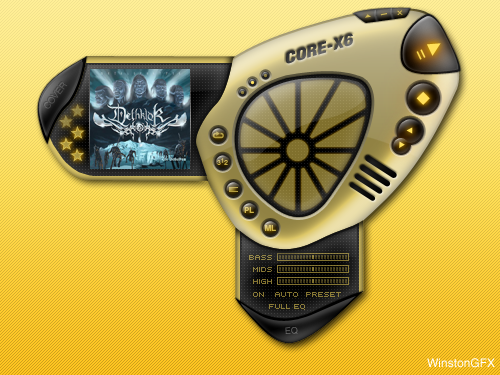
<style>
.page{position:relative;width:500px;height:375px}
.page>*{position:absolute;margin:0}
.t1{font:16.6px "Helvetica";color:#cbb556;scale:0.65 1}
.t2{font:5.5px "Helvetica";color:#cab455;scale:1.41 1}
.t3{font:14.7px "Helvetica-Condensed-BlackObl";scale:1.36 1}
.t4{font:6px "Helvetica";color:#c1ab4e}
.t5{font:6px "Helvetica";color:#ccba6f}
.t6{font:6px "Helvetica";color:#c3ad4e}
.t7{font:8px "Helvetica-Bold"}
.t8{font:8px "Uni0553";color:#928446;text-transform:uppercase}
.t9{font:8px "Uni0553";color:#887939;text-transform:uppercase}
.t10{font:8px "Uni0553";color:#81722e;text-transform:uppercase}
.t11{font:8px "Uni0553";color:#887835;text-transform:uppercase}
.t12{font:8px "Uni0553";color:#81712e;text-transform:uppercase}
.t13{font:8px "Uni0553";color:#897936;text-transform:uppercase}
.t14{font:8px "Uni0553";color:#8a7b37;text-transform:uppercase}
.t15{font:9px "Helvetica";text-transform:uppercase}
.t16{font:12px "Helvetica";color:#ffffff}
</style>
<div class="page">
<p class="t1" style="left:380px;top:13px;width:7px;height:3px;rotate:-11deg">_</p>
<p class="t2" style="left:397px;top:10px;width:6px;height:5px;rotate:-4deg">X</p>
<p class="t3" style="left:286px;top:33px;width:67px;height:31px;rotate:-16deg">CORE-X6</p>
<p class="t4" style="left:217px;top:160px;width:4px;height:5px">3</p>
<p class="t5" style="left:221px;top:158px;width:3px;height:5px">1</p>
<p class="t6" style="left:224px;top:160px;width:4px;height:5px">2</p>
<p class="t7" style="left:244px;top:207px;width:10px;height:6px">PL</p>
<p class="t7" style="left:265px;top:225px;width:11px;height:6px">ML</p>
<p class="t8" style="left:249px;top:255px;width:23px;height:5px">Bass</p>
<p class="t9" style="left:253px;top:267px;width:19px;height:5px">Mids</p>
<p class="t10" style="left:253px;top:279px;width:19px;height:5px">High</p>
<p class="t11" style="left:253px;top:292px;width:11px;height:5px">On</p>
<p class="t12" style="left:275px;top:292px;width:23px;height:5px">Auto</p>
<p class="t13" style="left:306px;top:292px;width:35px;height:5px">Preset</p>
<p class="t14" style="left:269px;top:304px;width:36px;height:6px">Full EQ</p>
<p class="t15" style="left:285px;top:327px;width:13px;height:7px;rotate:-3deg">EQ</p>
<p class="t16" style="left:427px;top:358px;width:68px;height:10px">WinstonGFX</p>
</div>
